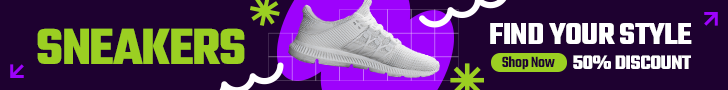
<style>
.page{position:relative;width:728px;height:90px;background:#1e0130}
.page>*{position:absolute;margin:0}
.t1{font:54.8px "Teko-Bold";letter-spacing:-0.025em;color:#9bcf22}
.t2{font:32.7px "Teko-Bold";letter-spacing:-0.025em;color:#ffffff}
.t3{font:16.1px "Teko-SemiBold";letter-spacing:-0.025em;color:#1e0130}
.t4{font:21.2px "Teko-Bold";letter-spacing:-0.025em;color:#ffffff}
</style>
<div class="page">
<p class="t1" style="left:37px;top:28px;width:208px;height:36px">SNEAKERS</p>
<p class="t2" style="left:490px;top:23px;width:202px;height:21px">FIND YOUR STYLE</p>
<p class="t3" style="left:502px;top:56px;width:53px;height:14px">Shop Now</p>
<p class="t4" style="left:573px;top:55px;width:118px;height:14px">50% DISCOUNT</p>
</div>
